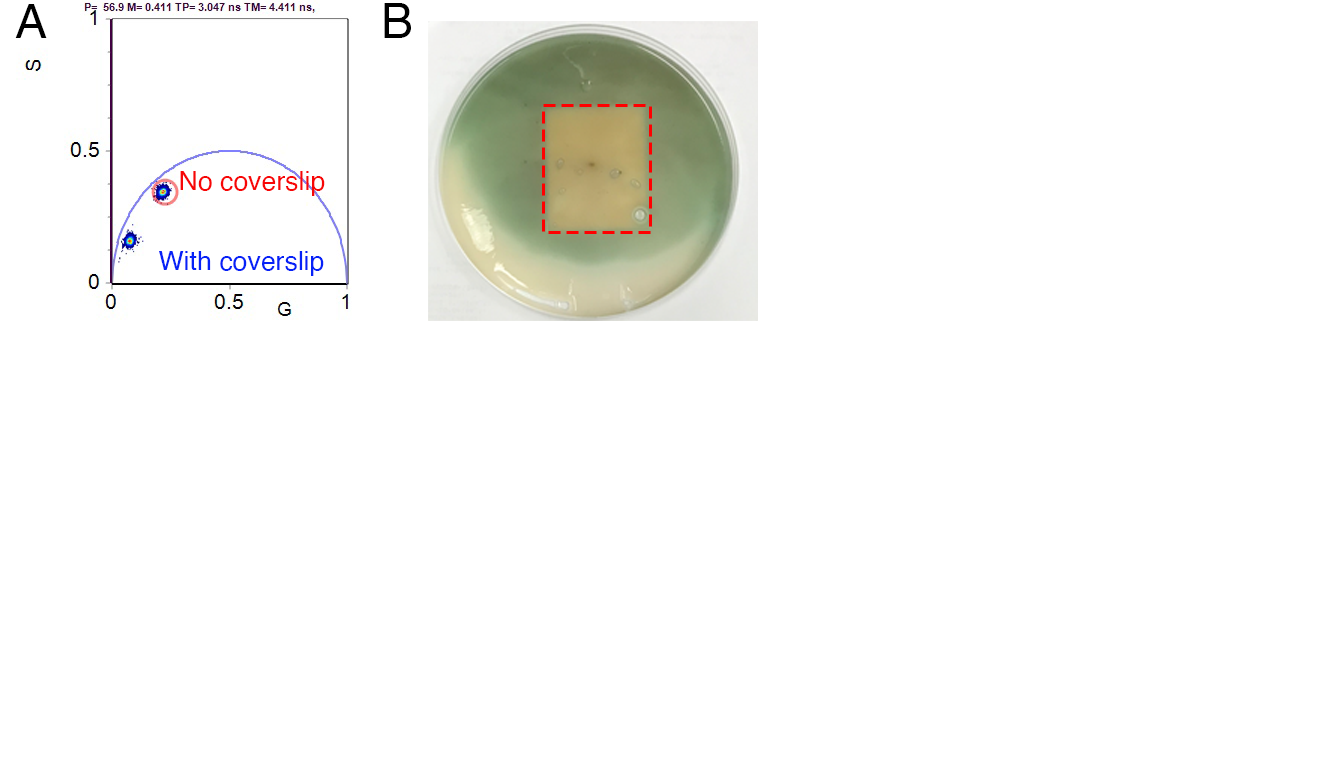
<style>
.page{position:relative;width:1335px;height:765px;background:#ffffff}
.page>*{position:absolute;margin:0}
.t1{font:48px "Helvetica";color:#000000}
.t2{font:26.7px "Helvetica";color:#f70606}
.t3{font:26.7px "Helvetica";color:#0622f7}
</style>
<div class="page">
<p class="t1" style="left:15px;top:4px;width:32px;height:34px">A</p>
<p class="t1" style="left:384px;top:3px;width:27px;height:35px">B</p>
<p class="t2" style="left:180px;top:171px;width:145px;height:25px">No coverslip</p>
<p class="t3" style="left:159px;top:251px;width:165px;height:25px">With coverslip</p>
</div>
